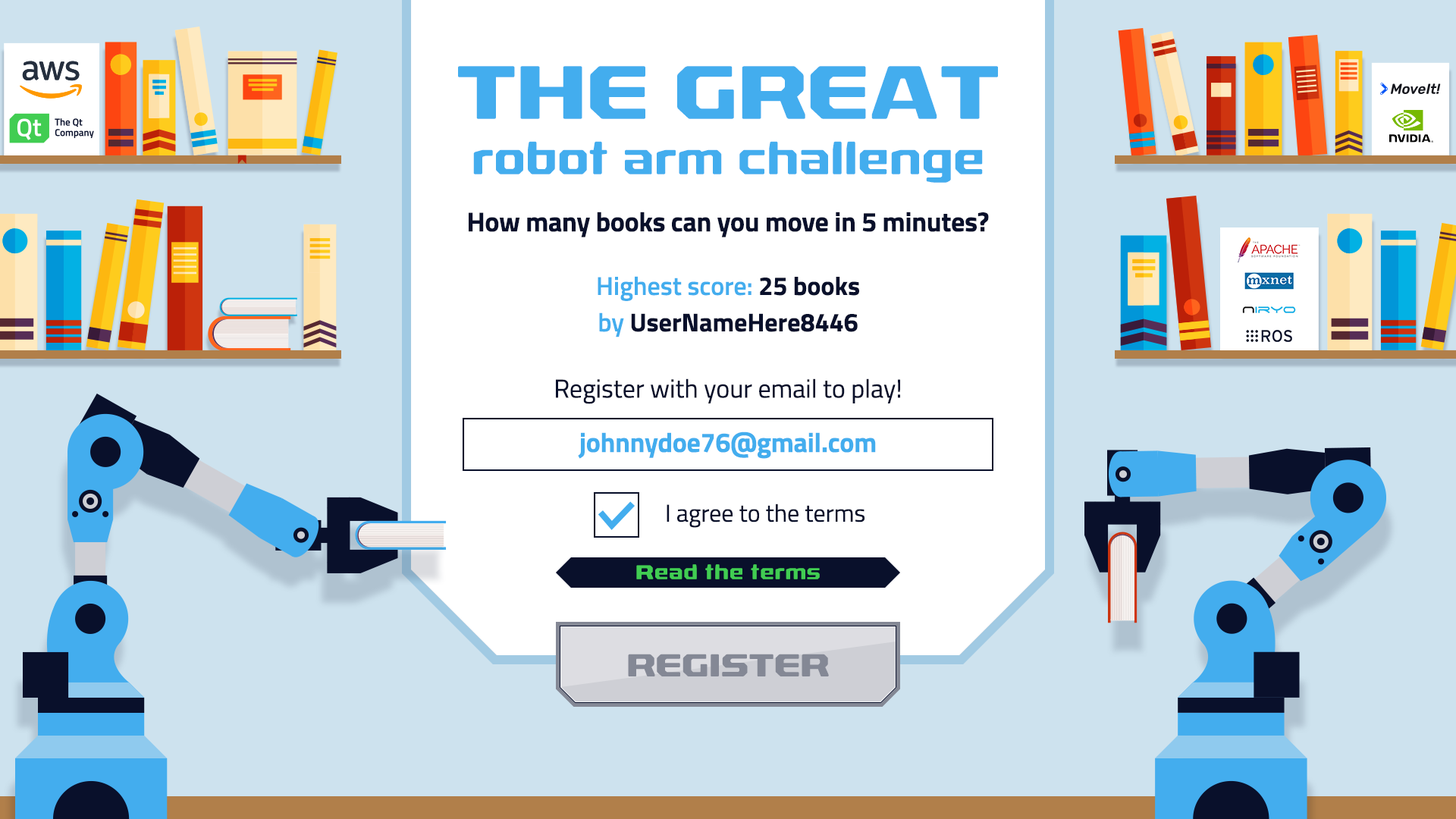
<style>
.page{position:relative;width:1456px;height:819px;background:#cde2ee}
.page>*{position:absolute;margin:0}
.t1{font:75.8px "RexliaRg-Bold";letter-spacing:0.025em;color:#43adee;text-transform:uppercase}
.t2{font:44px "RexliaRg-Bold";letter-spacing:0.025em;color:#43adee}
.t3{font:27.3px "TitilliumWeb-Bold";letter-spacing:-0.01em;color:#09102b}
.t4{font:25.8px/36.4px "TitilliumWeb-Bold";color:#09102b}
.t5{font:25.8px/36.4px "TitilliumWeb-SemiBold";color:#43adee}
.t6{font:25.8px "TitilliumWeb-Regular";color:#09102b}
.t7{font:27.3px "TitilliumWeb-Bold";letter-spacing:-0.01em;color:#43adee}
.t8{font:24.3px "TitilliumWeb-Regular";color:#09102b}
.t9{font:19.7px "RexliaRg-Bold";letter-spacing:0.05em;color:#41cd52}
.t10{font:31.8px "RexliaRg-Bold";letter-spacing:0.025em;color:#848895;text-transform:uppercase}
</style>
<div class="page">
<p class="t1" style="left:458px;top:66px;width:540px;height:53px">The Great</p>
<p class="t2" style="left:473px;top:141px;width:510px;height:42px">robot arm challenge</p>
<p class="t3" style="left:469px;top:212px;width:520px;height:25px">How many books can you move in 5 minutes?</p>
<p class="t4" style="left:598px;top:276px;width:261px;height:61px;text-align:center"><span class="t5">Highest score:</span> 25 books<br><span class="t5">by </span>UserNameHere8446</p>
<p class="t6" style="left:556px;top:378px;width:344px;height:26px">Register with your email to play!</p>
<p class="t7" style="left:578px;top:431px;width:298px;height:28px">johnnydoe76@gmail.com</p>
<p class="t8" style="left:667px;top:504px;width:197px;height:24px">I agree to the terms</p>
<p class="t9" style="left:636px;top:564px;width:184px;height:15px">Read the terms</p>
<p class="t10" style="left:628px;top:654px;width:201px;height:22px">Register</p>
</div>
